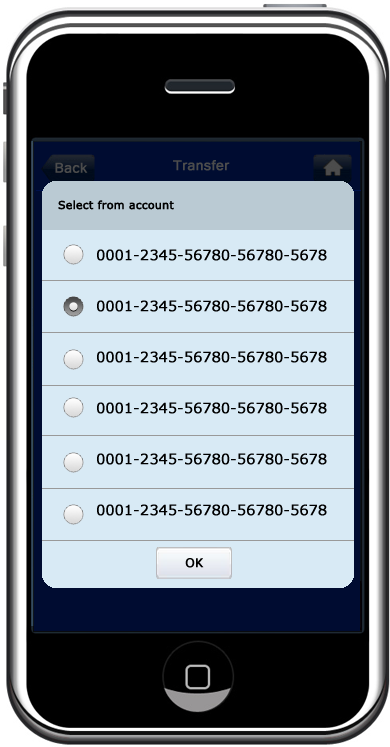
<style>
.page{position:relative;width:390px;height:747px;background:#d8eaf5}
.page>*{position:absolute;margin:0}
.t1{font:18px "Tunga";color:#4c4c4c;font-weight:bold}
.t2{font:11px "Verdana";color:#000000;font-weight:bold}
.t3{font:14px/51px "Verdana";color:#000000;font-weight:bold}
.t4{font:12px "Verdana";color:#000000;font-weight:bold}
</style>
<div class="page">
<p class="t1" style="left:173px;top:160px;width:57px;height:11px">Transfer</p>
<p class="t1" style="left:55px;top:162px;width:33px;height:11px">Back</p>
<p class="t2" style="left:58px;top:200px;width:116px;height:10px">Select from account</p>
<p class="t3" style="left:97px;top:249px;width:230px;height:267px">0001-2345-56780-56780-5678<br>0001-2345-56780-56780-5678<br>0001-2345-56780-56780-5678<br>0001-2345-56780-56780-5678<br>0001-2345-56780-56780-5678<br>0001-2345-56780-56780-5678</p>
<p class="t4" style="left:185px;top:558px;width:19px;height:10px">OK</p>
</div>
